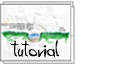
<style>
.page{position:relative;width:128px;height:64px;background:#ffffff}
.page>*{position:absolute;margin:0}
.t1{font:21.4px "Daubed";color:#000000}
</style>
<div class="page">
<p class="t1" style="left:10px;top:40px;width:50px;height:18px">tutorial</p>
</div>
